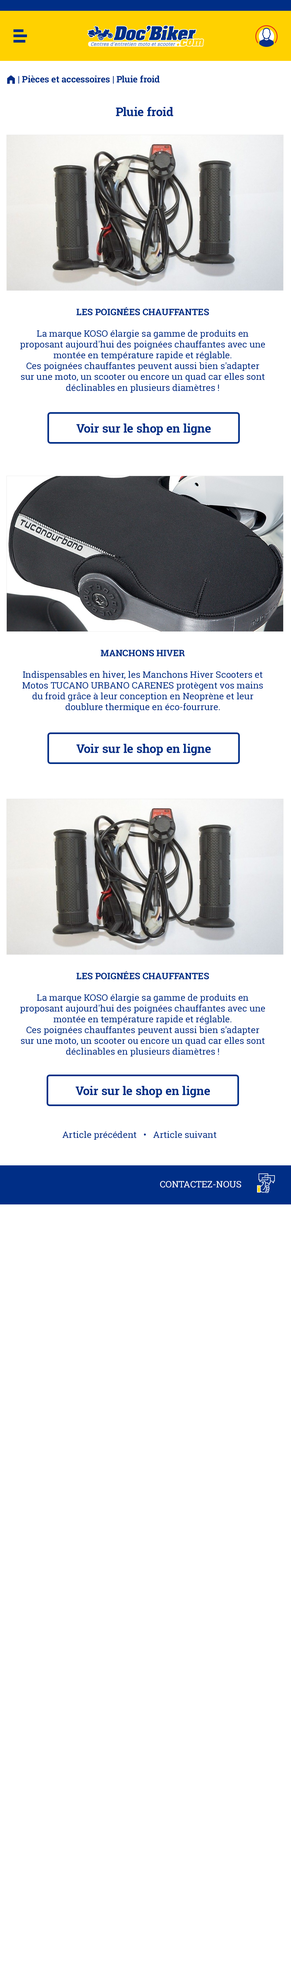
<style>
.page{position:relative;width:291px;height:1987px;background:#ffffff}
.page>*{position:absolute;margin:0}
.t1{font:9px "RobotoSlab-Bold";color:#002e86}
.t2{font:9px "FoundationIconsGeneral-Reg";color:#002e86}
.t3{font:12px "RobotoSlab-Bold";color:#002e86}
.t4{font:9px "RobotoSlab-Regular";color:#002e86}
.t5{font:9px "RobotoSlab-Bold";color:#002e86;text-transform:uppercase}
.t6{font:9px "RobotoSlab-Regular";color:#ffffff;text-transform:uppercase}
</style>
<div class="page">
<p class="t1" style="left:7px;top:75px;width:153px;height:9px"><span class="t2">m </span>| Pièces et accessoires | Pluie froid</p>
<p class="t3" style="left:116px;top:107px;width:57px;height:9px">Pluie froid</p>
<p class="t4" style="left:20px;top:307px;width:245px;height:86px;text-align:center"><span class="t5">Les poignées chauffantes<br></span><br>La marque KOSO élargie sa gamme de produits en proposant aujourd'hui des poignées chauffantes avec une montée en température rapide et réglable.<br>Ces poignées chauffantes peuvent aussi bien s'adapter sur une moto, un scooter ou encore un quad car elles sont déclinables en plusieurs diamètres !</p>
<p class="t3" style="left:76px;top:423px;width:135px;height:12px">Voir sur le shop en ligne</p>
<p class="t4" style="left:22px;top:650px;width:241px;height:62px;text-align:center"><span class="t5">Manchons hiver<br></span><br>Indispensables en hiver, les Manchons Hiver Scooters et Motos TUCANO URBANO CARENES protègent vos mains du froid grâce à leur conception en Neoprène et leur doublure thermique en éco-fourrure.</p>
<p class="t3" style="left:76px;top:744px;width:135px;height:11px">Voir sur le shop en ligne</p>
<p class="t4" style="left:20px;top:971px;width:245px;height:85px;text-align:center"><span class="t5">Les poignées chauffantes<br></span><br>La marque KOSO élargie sa gamme de produits en proposant aujourd'hui des poignées chauffantes avec une montée en température rapide et réglable.<br>Ces poignées chauffantes peuvent aussi bien s'adapter sur une moto, un scooter ou encore un quad car elles sont déclinables en plusieurs diamètres !</p>
<p class="t3" style="left:75px;top:1086px;width:135px;height:12px">Voir sur le shop en ligne</p>
<p class="t4" style="left:62px;top:1131px;width:155px;height:9px">Article précédent   •   Article suivant</p>
<p class="t6" style="left:160px;top:1181px;width:81px;height:6px">contactez-nous</p>
</div>
